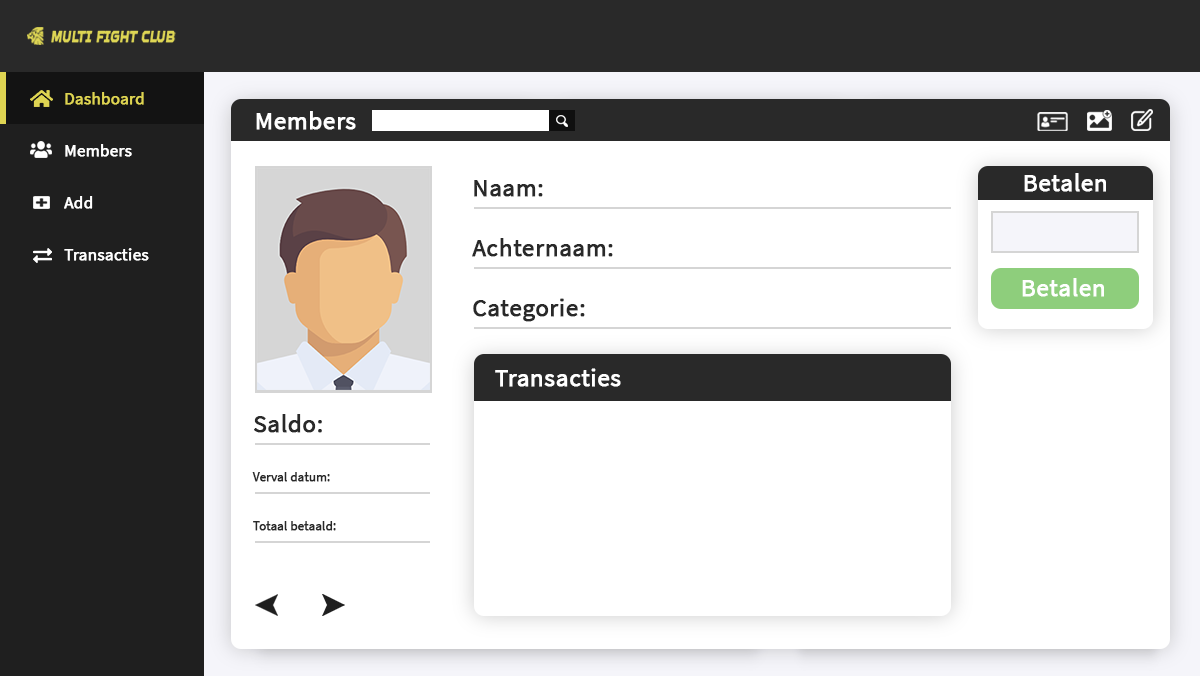
<style>
.page{position:relative;width:1200px;height:676px;background:#ffffff}
.page>*{position:absolute;margin:0}
.t1{font:16.7px "SourceSansPro-Regular";letter-spacing:0.005em;color:#ded452;font-weight:bold}
.t2{font:25px "SourceSansPro-Regular";letter-spacing:0.005em;color:#ffffff;font-weight:bold}
.t3{font:16.7px "SourceSansPro-Regular";letter-spacing:0.005em;color:#ffffff;font-weight:bold}
.t4{font:25px "SourceSansPro-Regular";letter-spacing:0.005em;color:#292929;font-weight:bold}
.t5{font:12.5px "SourceSansPro-Regular";letter-spacing:0.005em;color:#292929;font-weight:bold}
</style>
<div class="page">
<p class="t1" style="left:65px;top:92px;width:79px;height:13px">Dashboard</p>
<p class="t2" style="left:256px;top:111px;width:100px;height:19px">Members</p>
<p class="t3" style="left:65px;top:144px;width:67px;height:13px">Members</p>
<p class="t3" style="left:65px;top:144px;width:67px;height:13px">Members</p>
<p class="t2" style="left:1024px;top:173px;width:82px;height:19px">Betalen</p>
<p class="t4" style="left:474px;top:180px;width:69px;height:17px">Naam:</p>
<p class="t3" style="left:64px;top:196px;width:29px;height:13px">Add</p>
<p class="t3" style="left:64px;top:196px;width:29px;height:13px">Add</p>
<p class="t4" style="left:472px;top:238px;width:141px;height:19px">Achternaam:</p>
<p class="t3" style="left:64px;top:248px;width:85px;height:13px">Transacties</p>
<p class="t3" style="left:64px;top:248px;width:85px;height:13px">Transacties</p>
<p class="t2" style="left:1022px;top:278px;width:82px;height:19px">Betalen</p>
<p class="t4" style="left:473px;top:298px;width:112px;height:24px">Categorie:</p>
<p class="t2" style="left:495px;top:368px;width:126px;height:19px">Transacties</p>
<p class="t4" style="left:254px;top:414px;width:68px;height:19px">Saldo:</p>
<p class="t5" style="left:252px;top:472px;width:78px;height:10px">Verval datum:</p>
<p class="t5" style="left:253px;top:521px;width:83px;height:10px">Totaal betaald:</p>
</div>
